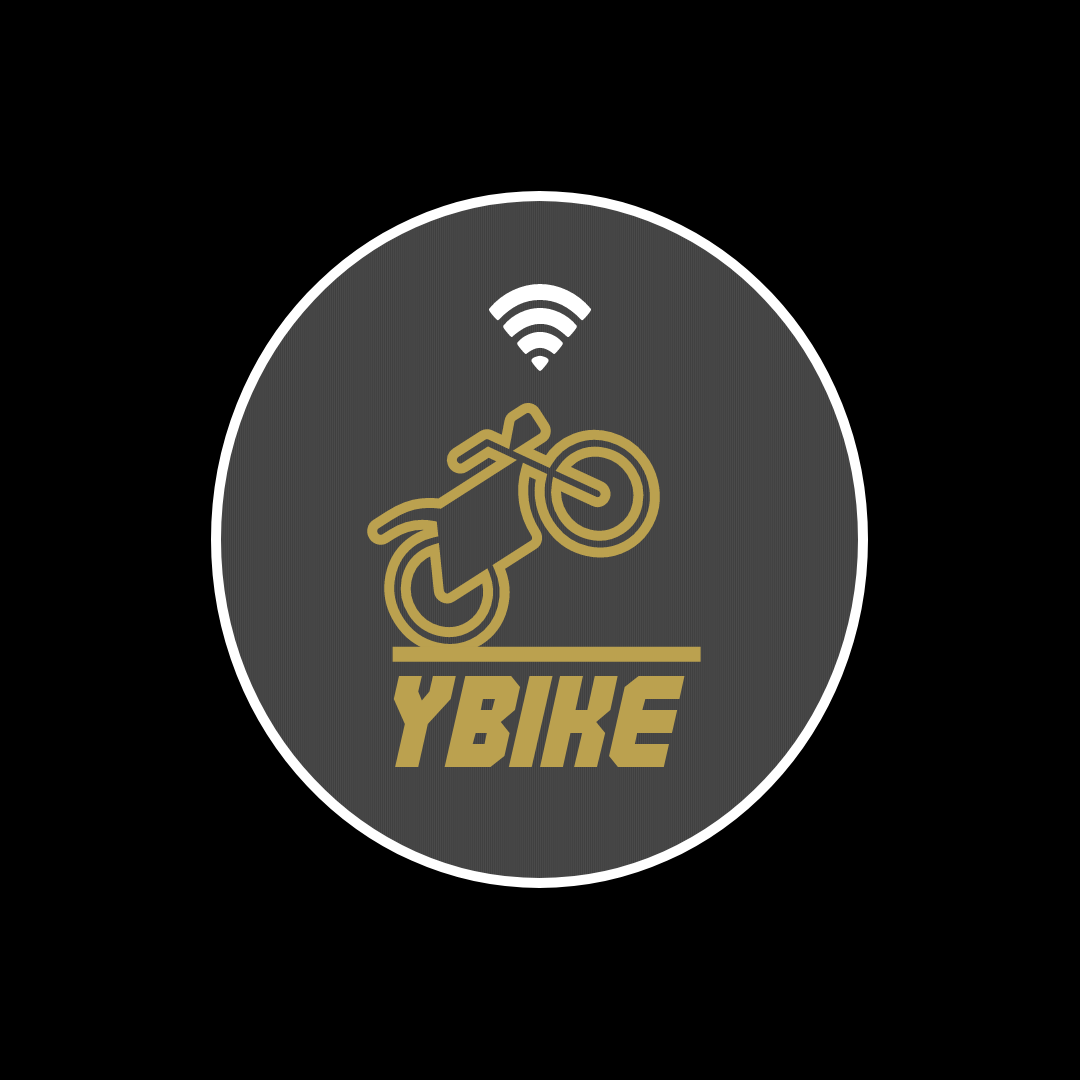
<style>
.page{position:relative;width:1080px;height:1080px;background:#000000}
.page>*{position:absolute;margin:0}
.t1{font:130px "Commando";color:#bba14f}
</style>
<div class="page">
<p class="t1" style="left:393px;top:676px;width:292px;height:91px">YBike</p>
</div>
